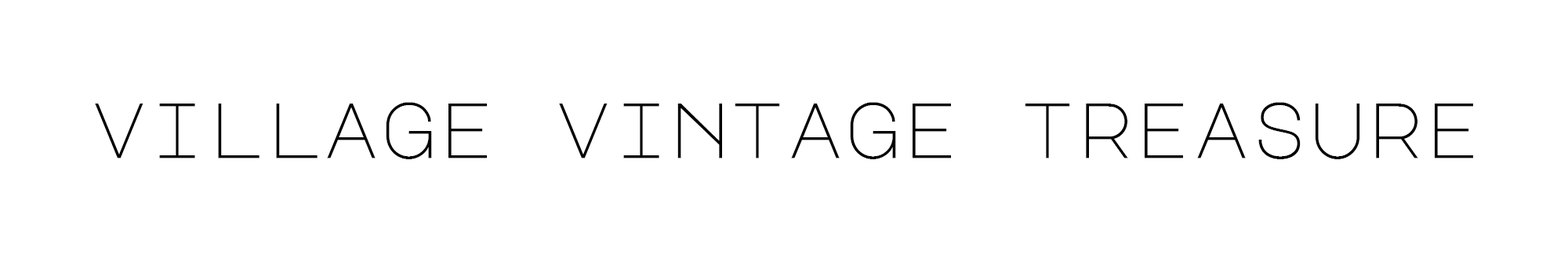
<style>
.page{position:relative;width:1568px;height:262px;background:#ffffff}
.page>*{position:absolute;margin:0}
.t1{font:78.4px "MajorMonoDisplay-Regular";color:#000000}
</style>
<div class="page">
<p class="t1" style="left:95px;top:102px;width:1378px;height:57px">village vintage treasure</p>
</div>
